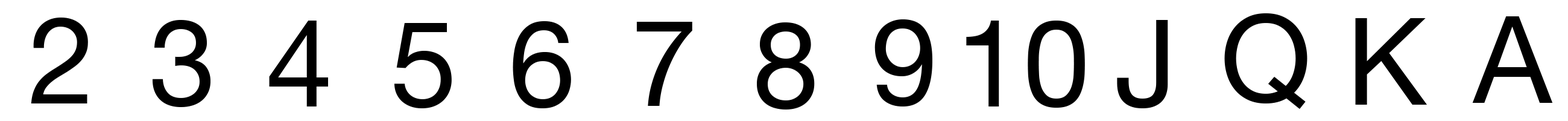
<style>
.page{position:relative;width:1568px;height:121px;background:#ffffff}
.page>*{position:absolute;margin:0}
.t1{font:120.6px "HelveticaNeue";color:#000000}
</style>
<div class="page">
<p class="t1" style="left:31px;top:17px;width:57px;height:86px">2</p>
<p class="t1" style="left:1224px;top:13px;width:83px;height:96px">Q</p>
<p class="t1" style="left:1472px;top:16px;width:81px;height:87px">A</p>
<p class="t1" style="left:153px;top:20px;width:57px;height:87px">3</p>
<p class="t1" style="left:269px;top:21px;width:59px;height:85px">4</p>
<p class="t1" style="left:394px;top:23px;width:58px;height:85px">5</p>
<p class="t1" style="left:513px;top:21px;width:58px;height:87px">6</p>
<p class="t1" style="left:636px;top:22px;width:56px;height:84px">7</p>
<p class="t1" style="left:757px;top:22px;width:58px;height:87px">8</p>
<p class="t1" style="left:874px;top:19px;width:58px;height:87px">9</p>
<p class="t1" style="left:966px;top:21px;width:119px;height:86px">10</p>
<p class="t1" style="left:1117px;top:20px;width:51px;height:88px">J</p>
<p class="t1" style="left:1355px;top:18px;width:72px;height:86px">K</p>
</div>
